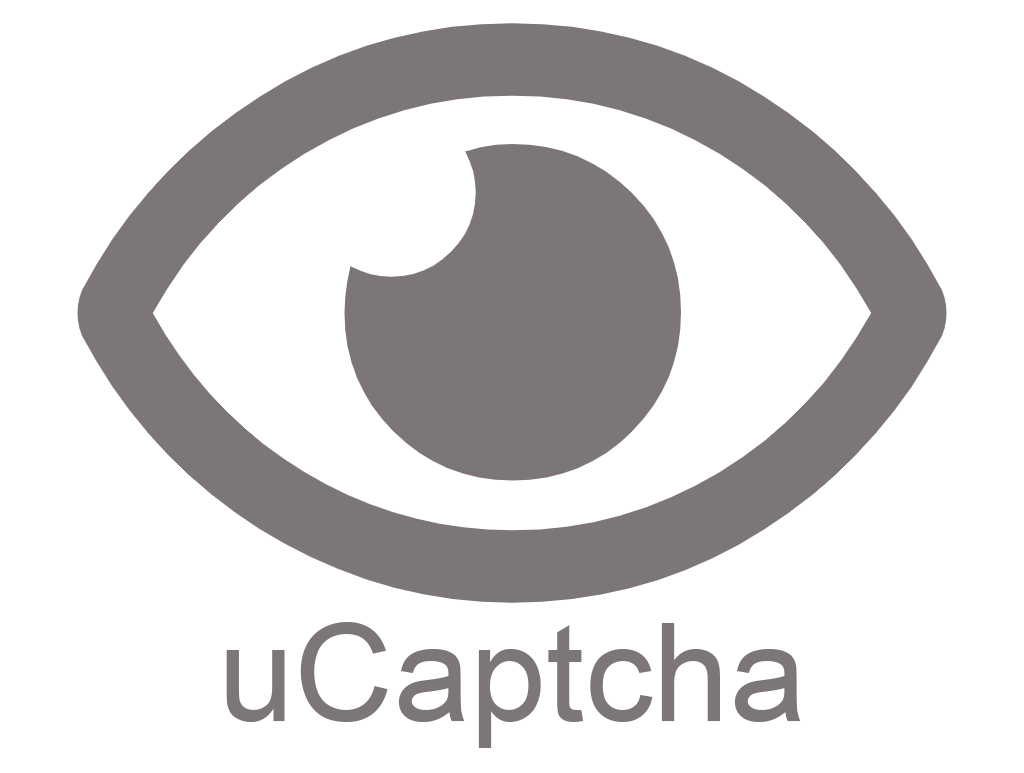
<style>
.page{position:relative;width:1024px;height:773px;background:#ffffff}
.page>*{position:absolute;margin:0}
.t1{font:137.4px "ArialMT";color:#7c7677}
</style>
<div class="page">
<p class="t1" style="left:226px;top:622px;width:575px;height:126px">uCaptcha</p>
</div>
